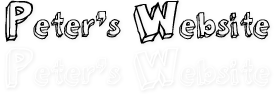
<style>
.page{position:relative;width:275px;height:94px;background:#ffffff}
.page>*{position:absolute;margin:0}
.t1{font:30px "3dumb";color:#000000}
.t2{font:48px "3dumb";color:#000000}
</style>
<div class="page">
<p class="t1" style="left:5px;top:0px;width:265px;height:44px"><span class="t2">P</span>eter’s <span class="t2">W</span>ebsite</p>
</div>
